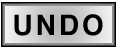
<style>
.page{position:relative;width:118px;height:48px}
.page>*{position:absolute;margin:0}
.t1{font:28px "Helvetica-Bold";letter-spacing:0.1em;color:#000000}
</style>
<div class="page">
<p class="t1" style="left:14px;top:14px;width:89px;height:22px">UNDO</p>
</div>
